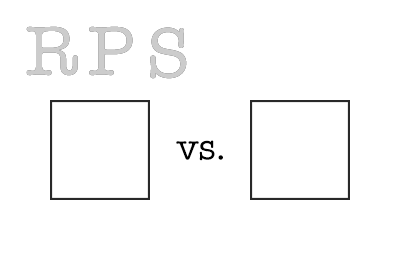
<style>
.page{position:relative;width:400px;height:275px;background:#ffffff}
.page>*{position:absolute;margin:0}
.t1{font:72px "AmericanTypewriter";color:#cccccc}
.t2{font:71.6px "AmericanTypewriter";color:#cccccc}
.t3{font:36px "AmericanTypewriter";color:#000000}
</style>
<div class="page">
<p class="t1" style="left:26px;top:26px;width:52px;height:50px">R</p>
<p class="t1" style="left:26px;top:26px;width:52px;height:50px">R</p>
<p class="t1" style="left:89px;top:26px;width:44px;height:50px">P</p>
<p class="t1" style="left:89px;top:26px;width:44px;height:50px">P</p>
<p class="t2" style="left:150px;top:27px;width:37px;height:52px">S</p>
<p class="t2" style="left:150px;top:27px;width:37px;height:52px">S</p>
<p class="t3" style="left:176px;top:140px;width:47px;height:21px">vs.</p>
</div>
